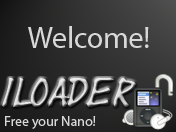
<style>
.page{position:relative;width:176px;height:132px}
.page>*{position:absolute;margin:0}
.t1{font:30px "MyriadPro-Regular";color:#d8d8d8}
.t2{font:30px "Yearsupplyoffairycakes"}
.t3{font:14px "MyriadPro-Regular";color:#d8d8d8}
</style>
<div class="page">
<p class="t1" style="left:28px;top:26px;width:121px;height:22px">Welcome!</p>
<p class="t2" style="left:2px;top:78px;width:134px;height:29px">iLoader</p>
<p class="t3" style="left:5px;top:116px;width:91px;height:13px">Free your Nano!</p>
</div>
